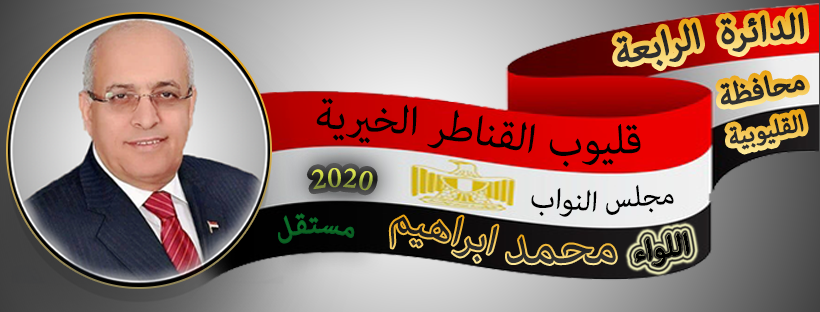
<style>
.page{position:relative;width:820px;height:312px}
.page>*{position:absolute;margin:0}
.t1{font:50px "AdobeArabic-Regular";color:#262626;font-weight:bold}
.t2{font:50px "AdobeArabic-Regular";color:#2a2a2a;font-weight:bold}
.t3{font:41.7px "AdobeArabic-Regular";color:#272727;font-weight:bold}
.t4{font:58.3px "AdobeArabic-Regular";color:#000000}
.t5{font:33.3px "AdobeArabic-Regular";color:#272727;font-weight:bold}
.t6{font:41.7px "AdobeArabic-Regular"}
.t7{font:41.7px "AdobeArabic-Regular";color:#000000}
.t8{font:41.7px "AdobeArabic-Regular";color:#0a6324;font-weight:bold}
.t9{font:41.7px "AdobeArabic-Regular";color:#000000;font-weight:bold}
</style>
<div class="page">
<p class="t1" style="left:720px;top:12px;width:85px;height:40px;rotate:-4deg">الدائرة</p>
<p class="t2" style="left:616px;top:22px;width:84px;height:45px;rotate:-12deg">الرابعة</p>
<p class="t3" style="left:720px;top:75px;width:85px;height:30px;rotate:-12deg">محافظة</p>
<p class="t4" style="left:316px;top:98px;width:101px;height:46px;rotate:4deg">الخيرية</p>
<p class="t4" style="left:427px;top:109px;width:108px;height:44px;rotate:9deg">القناطر</p>
<p class="t5" style="left:729px;top:113px;width:75px;height:37px;rotate:-12deg">القليوبية</p>
<p class="t4" style="left:549px;top:124px;width:92px;height:43px;rotate:-1deg">قليوب</p>
<p class="t6" style="left:311px;top:168px;width:62px;height:23px">2020</p>
<p class="t7" style="left:606px;top:184px;width:68px;height:31px;rotate:-4deg">مجلس</p>
<p class="t7" style="left:531px;top:188px;width:66px;height:29px;rotate:4deg">النواب</p>
<p class="t8" style="left:278px;top:213px;width:77px;height:31px;rotate:-2deg">مستقل</p>
<p class="t9" style="left:635px;top:232px;width:55px;height:35px;rotate:-9deg">اللواء</p>
</div>
